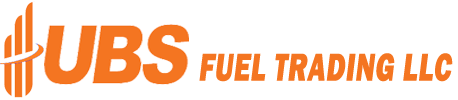
<style>
.page{position:relative;width:458px;height:100px;background:#ffffff}
.page>*{position:absolute;margin:0}
.t1{font:69.3px "FranklinGothic-Heavy";letter-spacing:0.025em;color:#f47521;font-style:italic;scale:0.69 1}
</style>
<div class="page">
<p class="t1" style="left:199px;top:53px;width:254px;height:29px">FUEL TRADING LLC</p>
</div>
